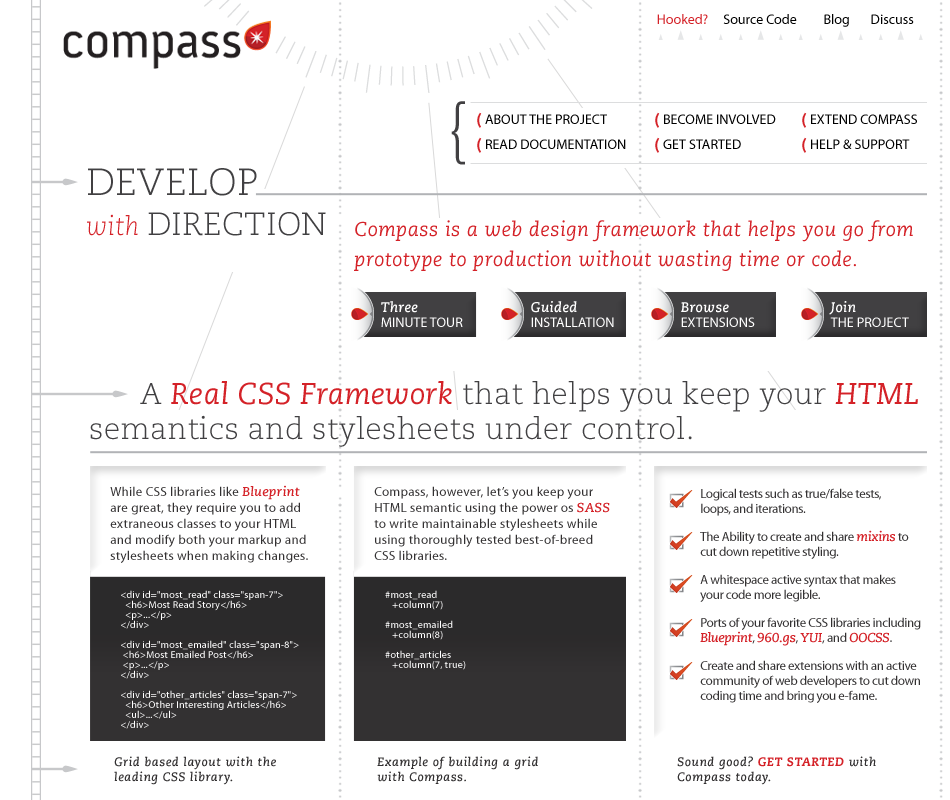
<style>
.page{position:relative;width:950px;height:800px;background:#ffffff}
.page>*{position:absolute;margin:0}
.t1{font:14px "MyriadPro-Regular";color:#000000}
.t2{font:14px "MyriadPro-Regular";color:#d42228}
.t3{font:62px "Caecilia-Light";color:#414042}
.t4{font:14px/25px "MyriadPro-Regular";color:#000000}
.t5{font:14px/25px "Caecilia-Heavy";color:#d42228}
.t6{font:32px/40px "Caecilia-Light";letter-spacing:0.01em;color:#414042}
.t7{font:38px/35px "Caecilia-Light";letter-spacing:0.01em;color:#414042}
.t8{font:26px/40px "Caecilia-LightItalic";letter-spacing:0.01em;color:#d42228}
.t9{font:20px/30px "Caecilia-Italic";letter-spacing:0.025em;color:#d42228}
.t10{font:14px/15px "MyriadPro-Regular";color:#ffffff}
.t11{font:14px/15px "Caecilia-BoldItalic";letter-spacing:0.025em;color:#ffffff}
.t12{font:30px/35px "Caecilia-Light";letter-spacing:0.01em;color:#414042}
.t13{font:30px/35px "Caecilia-Italic";letter-spacing:0.01em;color:#d42228}
.t14{font:13px/16px "MyriadPro-Regular";letter-spacing:0.025em;color:#333132}
.t15{font:13px/16px "Caecilia-BoldItalic";letter-spacing:0.025em;color:#d42228}
.t16{font:13px/15px "MyriadPro-Regular";letter-spacing:-0.025em;color:#333132}
.t17{font:13px/28px "MyriadPro-Regular";letter-spacing:-0.025em;color:#333132}
.t18{font:13px/28px "Caecilia-BoldItalic";letter-spacing:-0.025em;color:#d42228}
.t19{font:13px/15px "Caecilia-BoldItalic";letter-spacing:-0.025em;color:#d42228}
.t20{font:10px/10px "MyriadPro-Regular";letter-spacing:0.025em;color:#ffffff}
.t21{font:12px/15px "Caecilia-BoldItalic";letter-spacing:0.05em;color:#333132}
.t22{font:12px/15px "Caecilia-HeavyItalic";letter-spacing:0.05em;color:#d42228}
</style>
<div class="page">
<p class="t1" style="left:657px;top:14px;width:257px;height:13px"><span class="t2">Hooked?</span>     Source Code         Blog       Discuss</p>
<p class="t3" style="left:451px;top:101px;width:14px;height:64px">{</p>
<p class="t4" style="left:477px;top:112px;width:149px;height:41px"><span class="t5">( </span>ABOUT THE PROJECT<br><span class="t5">( </span>READ DOCUMENTATION</p>
<p class="t4" style="left:655px;top:112px;width:121px;height:41px"><span class="t5">( </span>BECOME INVOLVED<br><span class="t5">( </span>GET STARTED</p>
<p class="t4" style="left:802px;top:112px;width:115px;height:41px"><span class="t5">( </span>EXTEND COMPASS<br><span class="t5">( </span>HELP &amp; SUPPORT</p>
<p class="t6" style="left:87px;top:168px;width:239px;height:68px"><span class="t7">DEVELOP<br></span><span class="t8">with </span>DIRECTION</p>
<p class="t9" style="left:354px;top:220px;width:559px;height:52px">Compass is a web design framework that helps you go from <br>prototype to production without wasting time or code.</p>
<p class="t10" style="left:381px;top:301px;width:82px;height:26px"><span class="t11">Three<br></span>MINUTE TOUR</p>
<p class="t10" style="left:531px;top:301px;width:83px;height:26px"><span class="t11">Guided<br></span>INSTALLATION</p>
<p class="t10" style="left:681px;top:302px;width:74px;height:25px"><span class="t11">Browse<br></span>EXTENSIONS</p>
<p class="t10" style="left:829px;top:301px;width:80px;height:26px"><span class="t11">Join<br></span>THE PROJECT</p>
<p class="t12" style="left:90px;top:381px;width:828px;height:66px">A <span class="t13">Real CSS Framework</span> that helps you keep your <span class="t13">HTML <br></span>semantics and stylesheets under control.</p>
<p class="t14" style="left:110px;top:485px;width:198px;height:78px">While CSS libraries like <span class="t15">Blueprint<br></span>are great, they require you to add <br>extraneous classes to your HTML <br>and modify both your markup and<br>stylesheets when making changes.</p>
<p class="t14" style="left:374px;top:486px;width:236px;height:74px">Compass, however, let’s you keep your<br>HTML semantic using the power os <span class="t15">SASS<br></span>to write maintainable stylesheets while<br>using thoroughly tested best-of-breed<br>CSS libraries.</p>
<p class="t16" style="left:700px;top:488px;width:221px;height:215px">Logical tests such as true/false tests,<br>loops, and iterations.<br><span class="t17">The Ability to create and share </span><span class="t18">mixins</span><span class="t17"> to <br></span>cut down repetitive styling.<br><span class="t17">A whitespace active syntax that makes<br></span>your code more legible.<br><span class="t17">Ports of your favorite CSS libraries including <br></span><span class="t19">Blueprint</span>, <span class="t19">960.gs</span>, <span class="t19">YUI</span>, and <span class="t19">OOCSS</span>.<br><span class="t17">Create and share extensions with an active<br></span>community of web developers to cut down <br>coding time and bring you e-fame.</p>
<p class="t20" style="left:121px;top:590px;width:178px;height:139px">&lt;div id="most_read" class="span-7"&gt;<br>  &lt;h6&gt;Most Read Story&lt;/h6&gt;<br>  &lt;p&gt;...&lt;/p&gt;<br>&lt;/div&gt;<br><br>&lt;div id="most_emailed" class="span-8"&gt;<br> &lt;h6&gt;Most Emailed Post&lt;/h6&gt;<br> &lt;p&gt;...&lt;/p&gt;<br>&lt;/div&gt;<br><br>&lt;div id="other_articles" class="span-7"&gt;<br>  &lt;h6&gt;Other Interesting Articles&lt;/h6&gt;<br>  &lt;ul&gt;...&lt;/ul&gt;<br>&lt;/div&gt;</p>
<p class="t20" style="left:385px;top:590px;width:81px;height:80px">#most_read<br>   +column(7)<br><br>#most_emailed<br>   +column(8)<br><br>#other_articles<br>   +column(7, true)</p>
<p class="t21" style="left:114px;top:756px;width:162px;height:29px">Grid based layout with the <br>leading CSS library.</p>
<p class="t21" style="left:377px;top:756px;width:161px;height:28px">Example of building a grid <br>with Compass.</p>
<p class="t21" style="left:677px;top:756px;width:199px;height:29px">Sound good? <span class="t22">GET STARTED</span> with <br>Compass today.</p>
</div>
